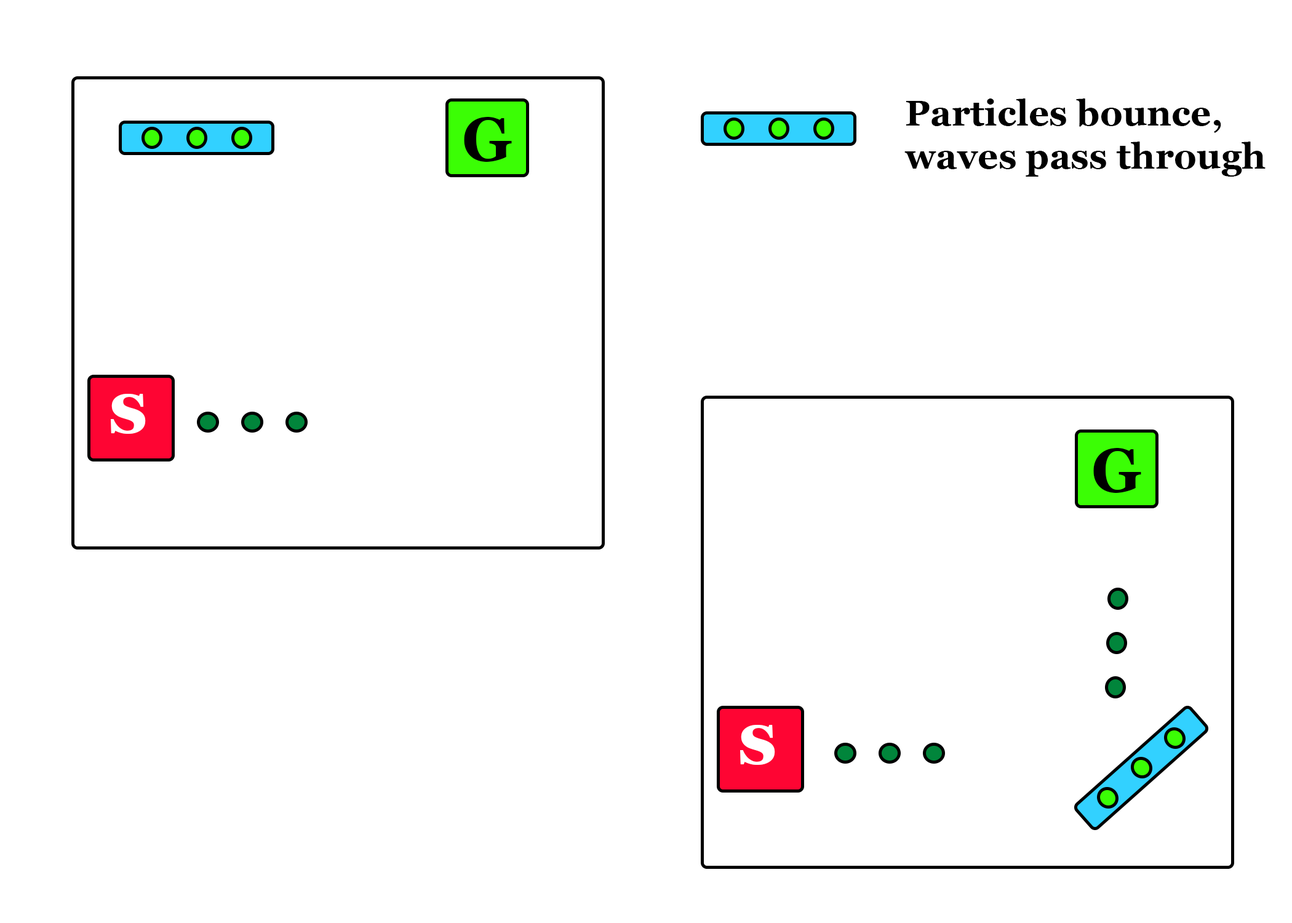
<style>
.page{position:relative;width:1292px;height:923px;background:#ffffff}
.page>*{position:absolute;margin:0}
.t1{font:35.9px "Georgia-Bold";color:#000000}
.t2{font:61.6px "Georgia-Bold";color:#000000}
.t3{font:76.9px "Georgia-Bold";color:#ffffff}
</style>
<div class="page">
<p class="t1" style="left:904px;top:98px;width:362px;height:79px">Particles bounce,<br>waves pass through</p>
<p class="t2" style="left:464px;top:117px;width:48px;height:45px">G</p>
<p class="t3" style="left:111px;top:394px;width:35px;height:40px">s</p>
<p class="t2" style="left:1093px;top:448px;width:48px;height:45px">G</p>
<p class="t3" style="left:740px;top:725px;width:35px;height:40px">s</p>
</div>
